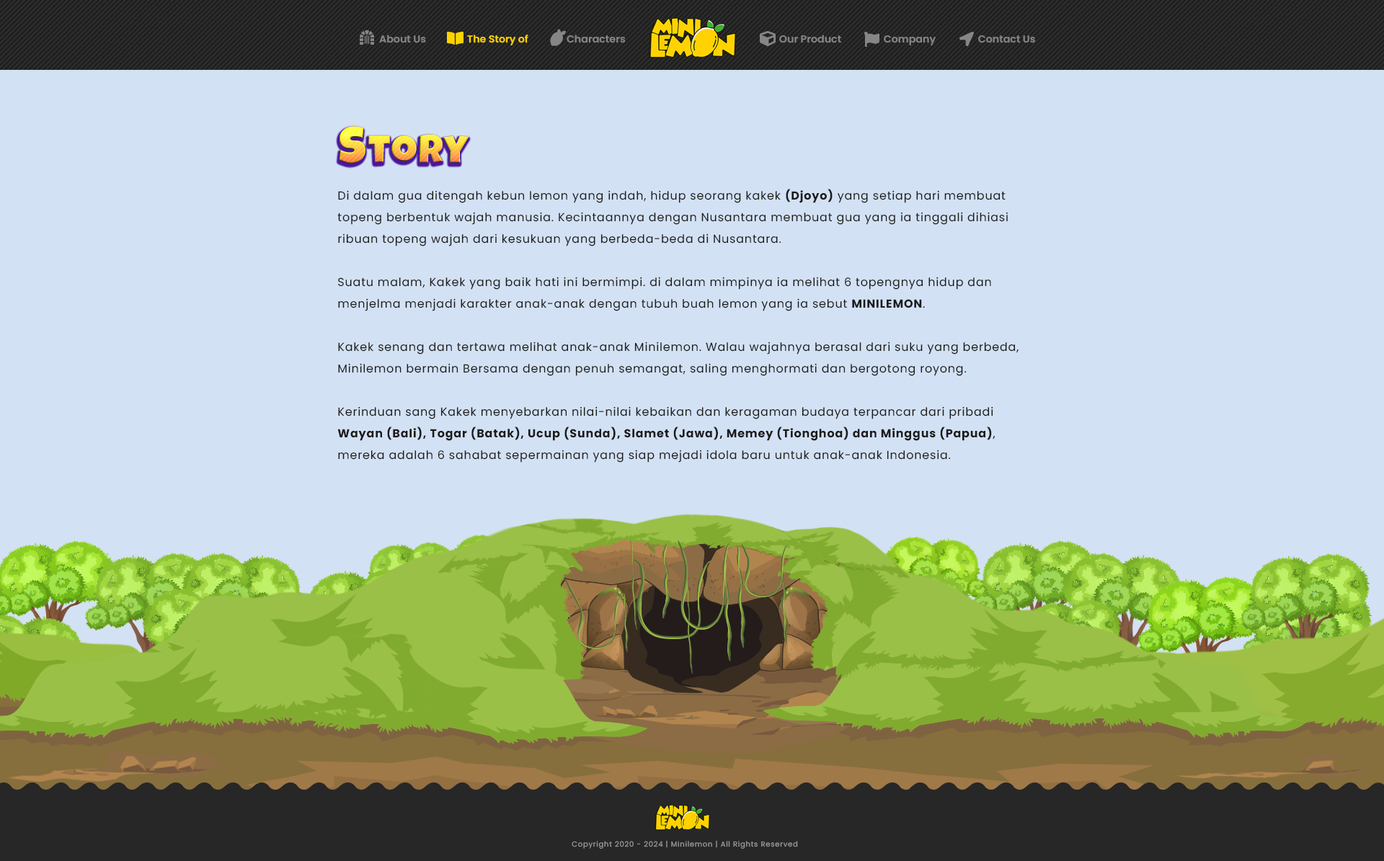
<style>
.page{position:relative;width:1384px;height:861px;background:#d3e1f4}
.page>*{position:absolute;margin:0}
.t1{font:10.1px "Poppins-SemiBold";color:#868686}
.t2{font:10.1px "Poppins-SemiBold";color:#ffd200}
.t3{font:39.7px "LuckiestGuy-Regular";letter-spacing:0.05em}
.t4{font:50.5px "LuckiestGuy-Regular";letter-spacing:0.05em}
.t5{font:11.5px/21.6px "Poppins-Regular";letter-spacing:0.05em;color:#1b1b1b}
.t6{font:11.5px/21.6px "Poppins-Bold";letter-spacing:0.05em;color:#1b1b1b}
.t7{font:7.2px "Poppins-Regular";letter-spacing:0.075em;color:#9b9b9b}
</style>
<div class="page">
<p class="t1" style="left:379px;top:35px;width:47px;height:8px">About Us</p>
<p class="t2" style="left:467px;top:35px;width:61px;height:10px">The Story of</p>
<p class="t1" style="left:567px;top:35px;width:59px;height:8px">Characters</p>
<p class="t1" style="left:779px;top:35px;width:62px;height:8px">Our Product</p>
<p class="t1" style="left:884px;top:35px;width:52px;height:10px">Company</p>
<p class="t1" style="left:978px;top:35px;width:57px;height:8px">Contact Us</p>
<p class="t3" style="left:340px;top:126px;width:129px;height:38px"><span class="t4">S</span>tory</p>
<p class="t5" style="left:337px;top:189px;width:682px;height:274px">Di dalam gua ditengah kebun lemon yang indah, hidup seorang kakek <span class="t6">(Djoyo)</span> yang setiap hari membuat topeng berbentuk wajah manusia. Kecintaannya dengan Nusantara membuat gua yang ia tinggali dihiasi ribuan topeng wajah dari kesukuan yang berbeda-beda di Nusantara.<br><br>Suatu malam, Kakek yang baik hati ini bermimpi. di dalam mimpinya ia melihat 6 topengnya hidup dan menjelma menjadi karakter anak-anak dengan tubuh buah lemon yang ia sebut <span class="t6">MINILEMON</span>. <br><br>Kakek senang dan tertawa melihat anak-anak Minilemon. Walau wajahnya berasal dari suku yang berbeda, Minilemon bermain Bersama dengan penuh semangat, saling menghormati dan bergotong royong.<br><br>Kerinduan sang Kakek menyebarkan nilai-nilai kebaikan dan keragaman budaya terpancar dari pribadi <span class="t6">Wayan (Bali), Togar (Batak), Ucup (Sunda), Slamet (Jawa), Memey (Tionghoa) dan Minggus (Papua)</span>, mereka adalah 6 sahabat sepermainan yang siap mejadi idola baru untuk anak-anak Indonesia.</p>
<p class="t7" style="left:572px;top:841px;width:226px;height:8px">Copyright 2020 - 2024 | Minilemon | All Rights Reserved</p>
</div>
